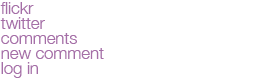
<style>
.page{position:relative;width:280px;height:80px;background:#ffffff}
.page>*{position:absolute;margin:0}
.t1{font:17px "HelveticaNeue-Light";letter-spacing:-0.01em;color:#a56fa7}
</style>
<div class="page">
<p class="t1" style="left:0px;top:2px;width:34px;height:12px">flickr</p>
<p class="t1" style="left:0px;top:17px;width:45px;height:12px">twitter</p>
<p class="t1" style="left:1px;top:33px;width:76px;height:11px">comments</p>
<p class="t1" style="left:1px;top:48px;width:103px;height:11px">new comment</p>
<p class="t1" style="left:1px;top:62px;width:37px;height:16px">log in</p>
</div>
